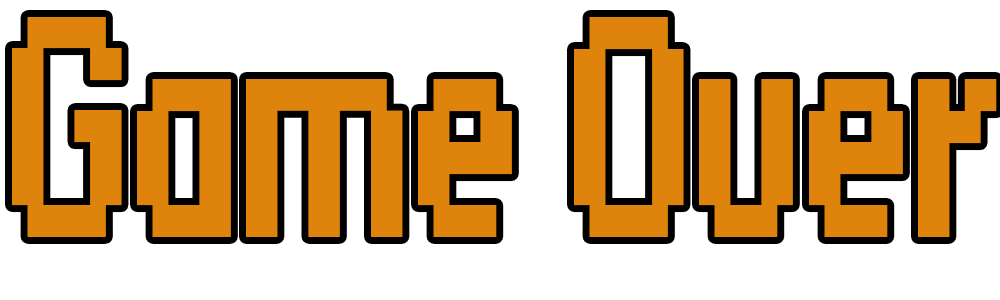
<style>
.page{position:relative;width:1000px;height:300px;background:#ffffff}
.page>*{position:absolute;margin:0}
.t1{font:252.6px "Standard0763";color:#de830c;scale:0.49 1}
</style>
<div class="page">
<p class="t1" style="left:12px;top:17px;width:985px;height:220px">Game Over</p>
</div>
